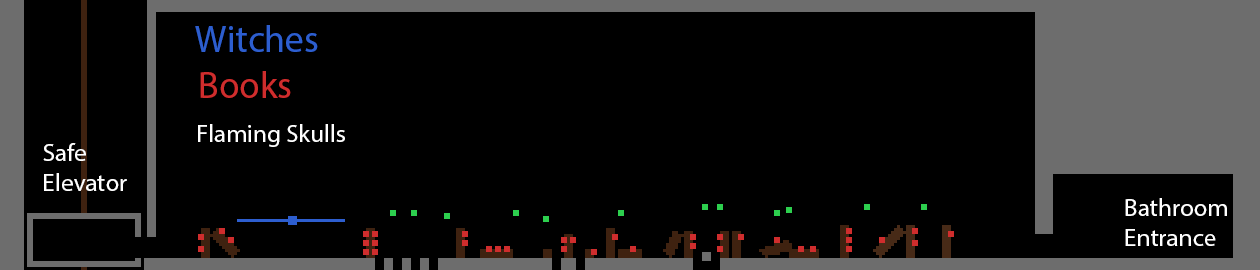
<style>
.page{position:relative;width:1260px;height:270px;background:#000000}
.page>*{position:absolute;margin:0}
.t1{font:37.5px "MyriadPro-Regular";color:#2d5ecf}
.t2{font:37.5px "MyriadPro-Regular";color:#cf2d2d}
.t3{font:25px "MyriadPro-Regular";color:#ffffff}
</style>
<div class="page">
<p class="t1" style="left:195px;top:25px;width:123px;height:27px">Witches</p>
<p class="t2" style="left:200px;top:71px;width:91px;height:27px">Books</p>
<p class="t3" style="left:198px;top:124px;width:147px;height:23px">Flaming Skulls</p>
<p class="t3" style="left:43px;top:143px;width:84px;height:48px">Safe<br>Elevator</p>
<p class="t3" style="left:1125px;top:198px;width:102px;height:48px">Bathroom<br>Entrance</p>
</div>
